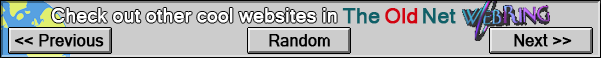
<style>
.page{position:relative;width:601px;height:58px;background:#cccccc}
.page>*{position:absolute;margin:0}
.t1{font:18.8px "MicrosoftSansSerif";color:#ffffff;font-weight:bold}
.t2{font:20.8px "MicrosoftSansSerif";color:#0f6068;font-weight:bold}
.t3{font:20.8px "MicrosoftSansSerif";color:#d20310;font-weight:bold}
.t4{font:15.9px "MicrosoftSansSerif";color:#000000;font-weight:bold}
</style>
<div class="page">
<p class="t1" style="left:51px;top:8px;width:286px;height:15px">Check out other cool websites in</p>
<p class="t2" style="left:342px;top:8px;width:38px;height:16px">The</p>
<p class="t3" style="left:385px;top:8px;width:33px;height:16px">Old</p>
<p class="t2" style="left:423px;top:8px;width:33px;height:16px">Net</p>
<p class="t4" style="left:14px;top:34px;width:90px;height:13px">&lt;&lt; Previous</p>
<p class="t4" style="left:269px;top:34px;width:61px;height:13px">Random</p>
<p class="t4" style="left:514px;top:34px;width:58px;height:13px">Next &gt;&gt;</p>
</div>
